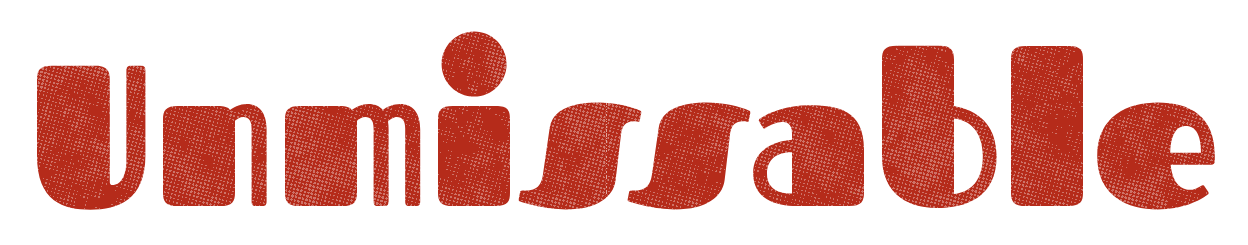
<style>
.page{position:relative;width:1248px;height:245px;background:#ffffff}
.page>*{position:absolute;margin:0}
.t1{font:200px "Fascinate-Regular";color:#b52b1a}
</style>
<div class="page">
<p class="t1" style="left:37px;top:31px;width:1178px;height:179px">Unmissable</p>
</div>
